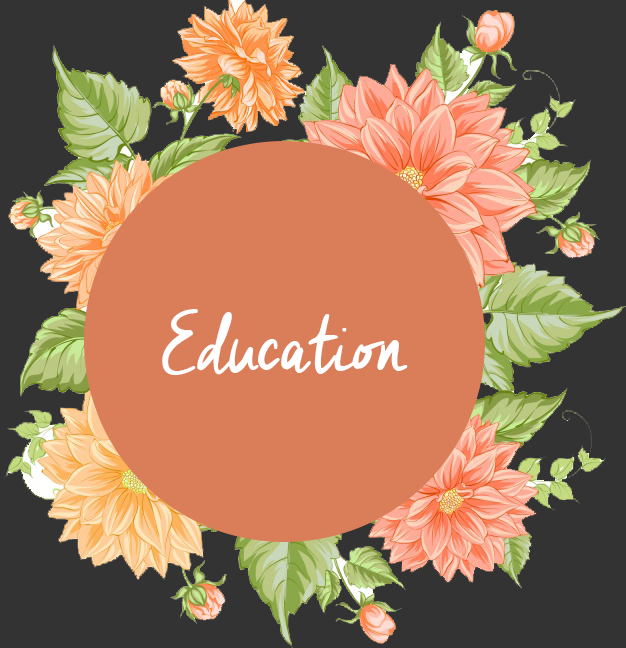
<style>
.page{position:relative;width:626px;height:648px;background:#333333}
.page>*{position:absolute;margin:0}
.t1{font:100px "CheddarJack";color:#ffffff}
</style>
<div class="page">
<p class="t1" style="left:162px;top:309px;width:246px;height:66px">Education</p>
</div>
